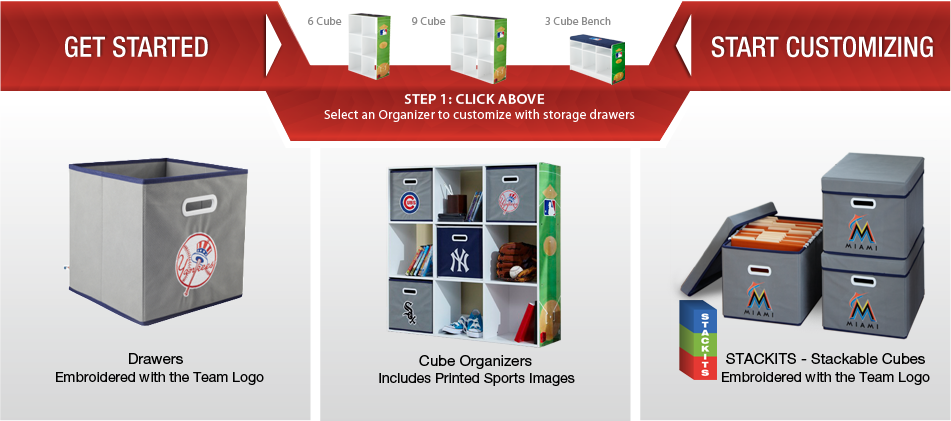
<style>
.page{position:relative;width:951px;height:421px}
.page>*{position:absolute;margin:0}
.t1{font:11px "MyriadPro-Regular";letter-spacing:0.025em;color:#8d8d8d}
.t2{font:14.8px "MyriadPro-Semibold";letter-spacing:0.025em;color:#ffffff}
.t3{font:13px "MyriadPro-Regular";letter-spacing:0.025em;color:#ffffff}
.t4{font:15px "HelveticaNeueLTPro-Roman";color:#000000}
.t5{font:14px "HelveticaNeueLTPro-Roman";color:#000000}
</style>
<div class="page">
<p class="t1" style="left:308px;top:17px;width:34px;height:8px">6 Cube</p>
<p class="t1" style="left:412px;top:17px;width:34px;height:8px">9 Cube</p>
<p class="t1" style="left:545px;top:17px;width:66px;height:8px">3 Cube Bench</p>
<p class="t2" style="left:404px;top:94px;width:141px;height:10px">STEP 1: CLICK ABOVE</p>
<p class="t3" style="left:324px;top:109px;width:311px;height:13px">Select an Organizer to customize with storage drawers</p>
<p class="t4" style="left:129px;top:353px;width:54px;height:11px">Drawers</p>
<p class="t4" style="left:726px;top:353px;width:199px;height:11px">STACKITS - Stackable Cubes</p>
<p class="t4" style="left:419px;top:355px;width:113px;height:14px">Cube Organizers</p>
<p class="t5" style="left:56px;top:372px;width:208px;height:13px">Embroidered with the Team Logo</p>
<p class="t5" style="left:379px;top:373px;width:196px;height:13px">Includes Printed Sports Images</p>
<p class="t5" style="left:722px;top:372px;width:208px;height:13px">Embroidered with the Team Logo</p>
</div>
